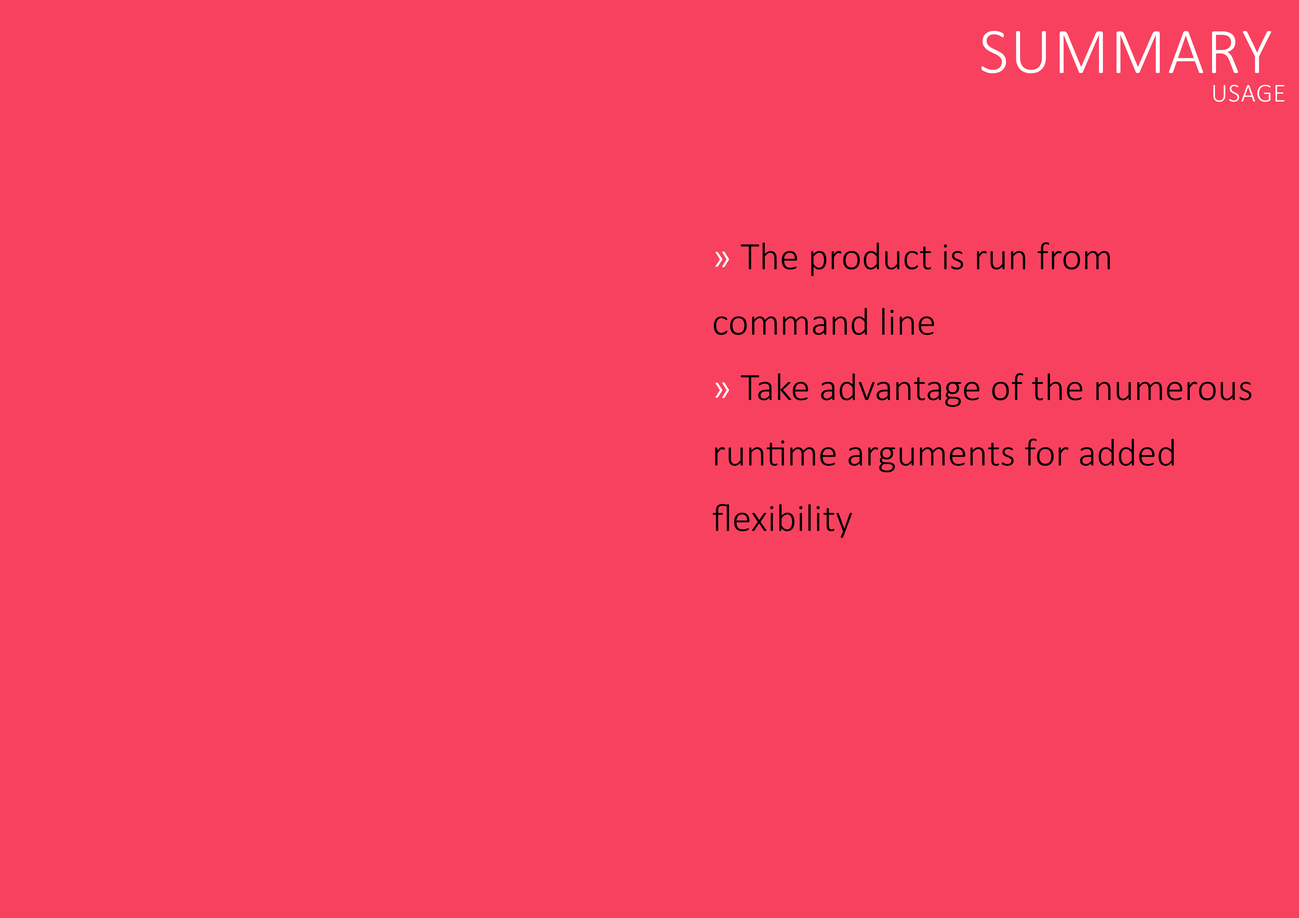
<style>
.page{position:relative;width:1299px;height:918px;background:#f8415f}
.page>*{position:absolute;margin:0}
.t1{font:65.4px "Calibri-Light";letter-spacing:0.025em;color:#ffffff;text-transform:uppercase}
.t2{font:26.2px "Calibri-Light";letter-spacing:0.025em;color:#ffffff;text-transform:uppercase}
.t3{font:39.3px/65.4px "Calibri-Light";color:#000000}
.t4{font:39.3px/65.4px "Calibri-Light";color:#ffffff}
</style>
<div class="page">
<p class="t1" style="left:981px;top:31px;width:290px;height:42px">summary</p>
<p class="t2" style="left:1213px;top:85px;width:71px;height:17px">usage</p>
<p class="t3" style="left:713px;top:242px;width:538px;height:296px"><span class="t4">» </span>The product is run from command line<br><span class="t4">» </span>Take advantage of the numerous runtime arguments for added flexibility</p>
</div>
